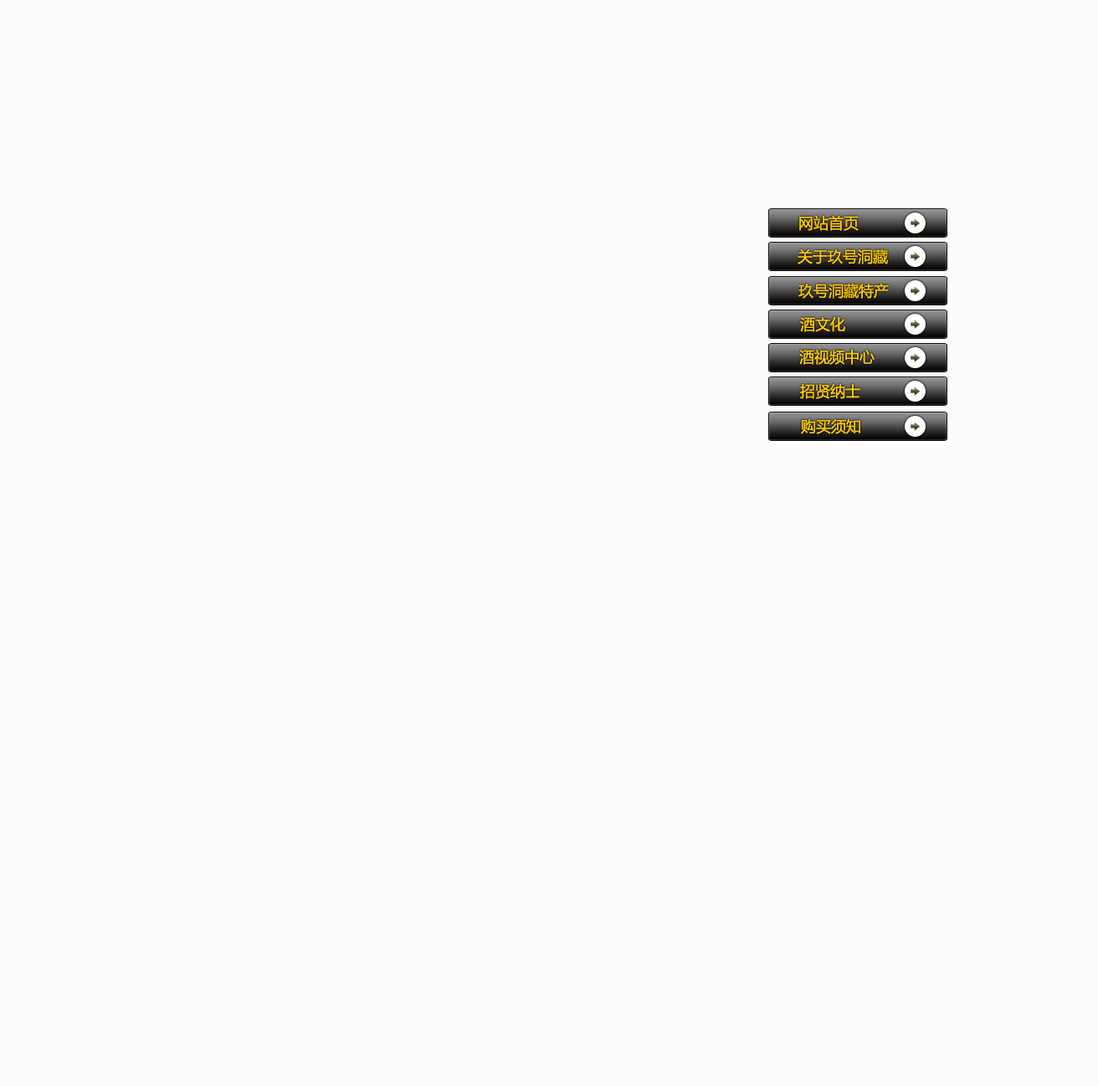
<style>
.page{position:relative;width:1098px;height:1086px;background:#fdfcfb}
.page>*{position:absolute;margin:0}
.t1{font:15.1px "MicrosoftYaHei";color:#ffcc00}
</style>
<div class="page">
<p class="t1" style="left:799px;top:215px;width:60px;height:16px">网站首页</p>
<p class="t1" style="left:797px;top:249px;width:91px;height:15px">关于玖号洞藏</p>
<p class="t1" style="left:798px;top:283px;width:91px;height:16px">玖号洞藏特产</p>
<p class="t1" style="left:800px;top:316px;width:45px;height:16px">酒文化</p>
<p class="t1" style="left:799px;top:349px;width:75px;height:16px">酒视频中心</p>
<p class="t1" style="left:800px;top:383px;width:60px;height:16px">招贤纳士</p>
<p class="t1" style="left:801px;top:418px;width:59px;height:16px">购买须知</p>
</div>
